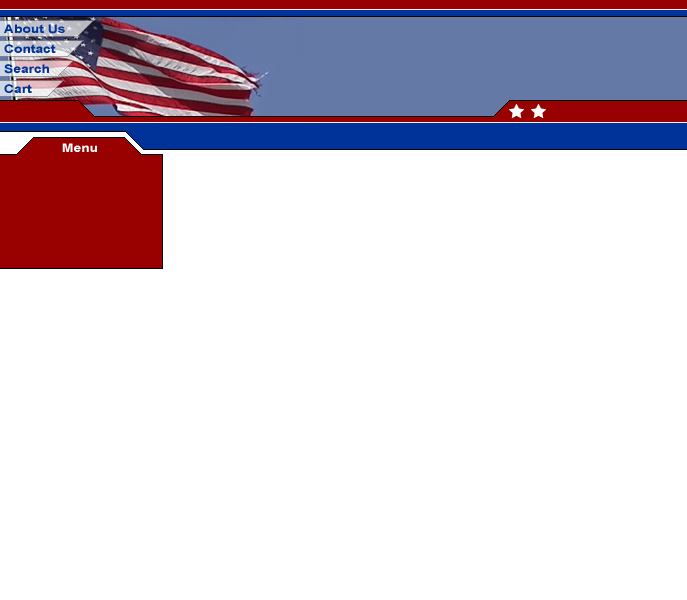
<style>
.page{position:relative;width:687px;height:600px;background:#ffffff}
.page>*{position:absolute;margin:0}
.t1{font:12px/20px "Arial-BoldMT";color:#003399;scale:1.15 1}
.t2{font:12px "Arial-BoldMT";color:#ffffff;scale:1.15 1}
</style>
<div class="page">
<p class="t1" style="left:4px;top:24px;width:61px;height:69px">About Us<br>Contact<br>Search<br>Cart</p>
<p class="t2" style="left:62px;top:143px;width:35px;height:9px">Menu</p>
</div>
